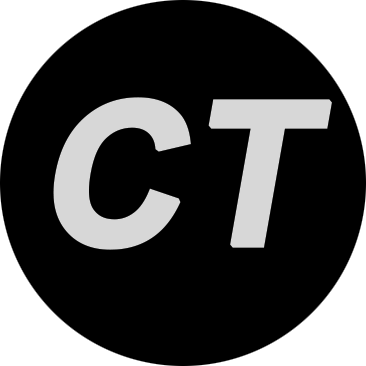
<style>
.page{position:relative;width:366px;height:366px;background:#000000}
.page>*{position:absolute;margin:0}
.t1{font:200px "Arial-BoldMT";color:#d7d7d7;font-weight:bold;font-style:italic}
</style>
<div class="page">
<p class="t1" style="left:53px;top:97px;width:279px;height:153px">CT</p>
</div>
